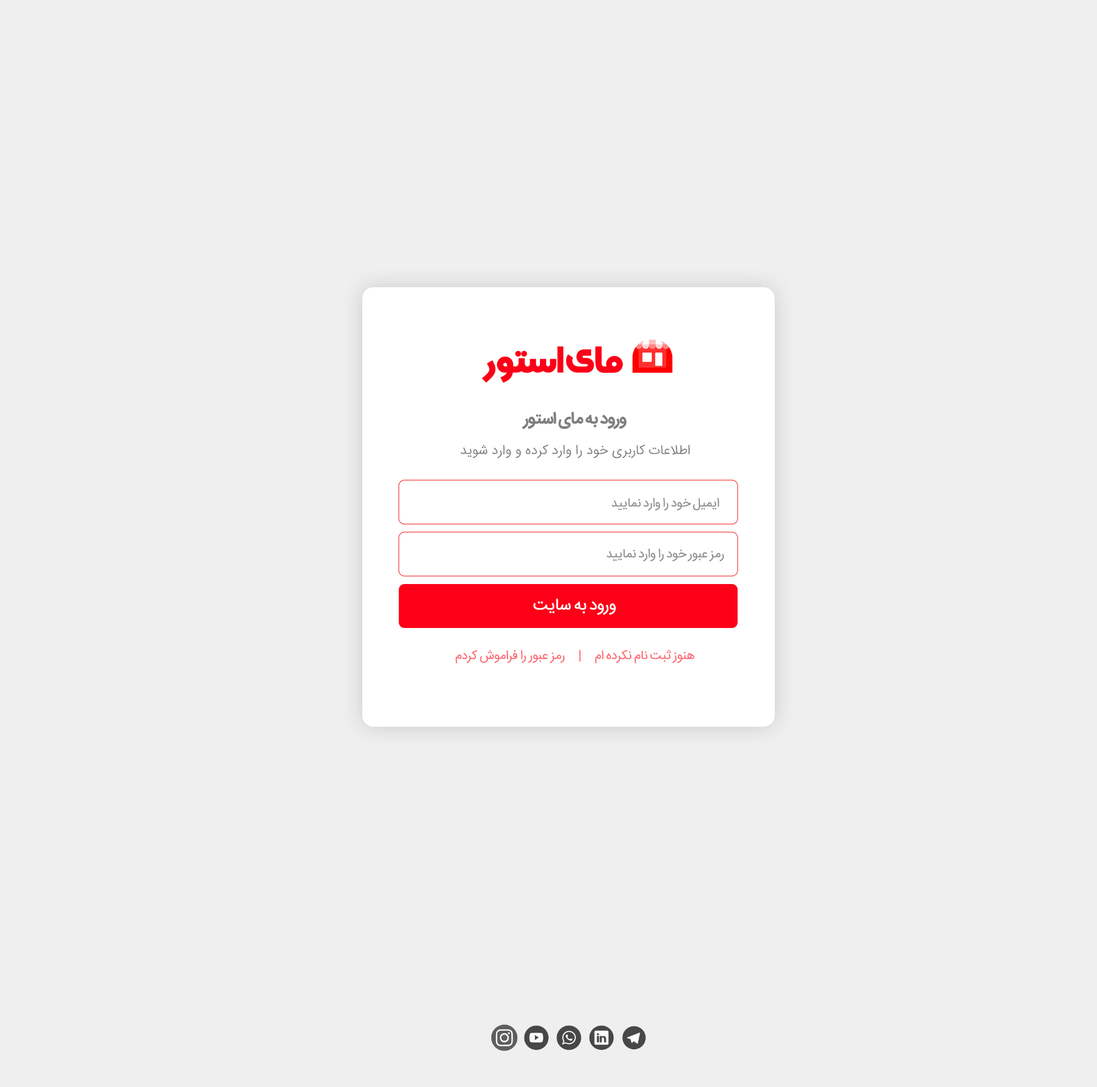
<style>
.page{position:relative;width:1097px;height:1087px;background:#efefef}
.page>*{position:absolute;margin:0}
.t1{font:37.3px "SultanAdan";letter-spacing:-0.04em;color:#fc0018}
.t2{font:16.7px "IRANSansFaNum-Bold";letter-spacing:-0.04em;color:#7f7f7f}
.t3{font:13.5px "IRANSansFaNum-Light";color:#7f7f7f}
.t4{font:12.7px "IRANSansFaNum";letter-spacing:-0.04em;color:#939393}
.t5{font:16.7px "IRANSansFaNum";letter-spacing:-0.04em;color:#ffffff}
.t6{font:12.7px "IRANSansFaNum";letter-spacing:-0.04em;color:#fd6e76}
</style>
<div class="page">
<p class="t1" style="left:481px;top:346px;width:142px;height:37px">مای استور</p>
<p class="t2" style="left:521px;top:412px;width:106px;height:17px">ورود به مای استور</p>
<p class="t3" style="left:460px;top:444px;width:229px;height:15px">اطلاعات کاربری خود را وارد کرده و وارد شوید</p>
<p class="t4" style="left:611px;top:498px;width:108px;height:13px">ایمیل خود را وارد نمایید</p>
<p class="t4" style="left:606px;top:549px;width:118px;height:13px">رمز عبور خود را وارد نمایید</p>
<p class="t5" style="left:533px;top:599px;width:83px;height:16px">ورود به سایت</p>
<p class="t6" style="left:455px;top:650px;width:239px;height:14px">هنوز ثبت نام نکرده ام     |     رمز عبور را فراموش کردم</p>
</div>
